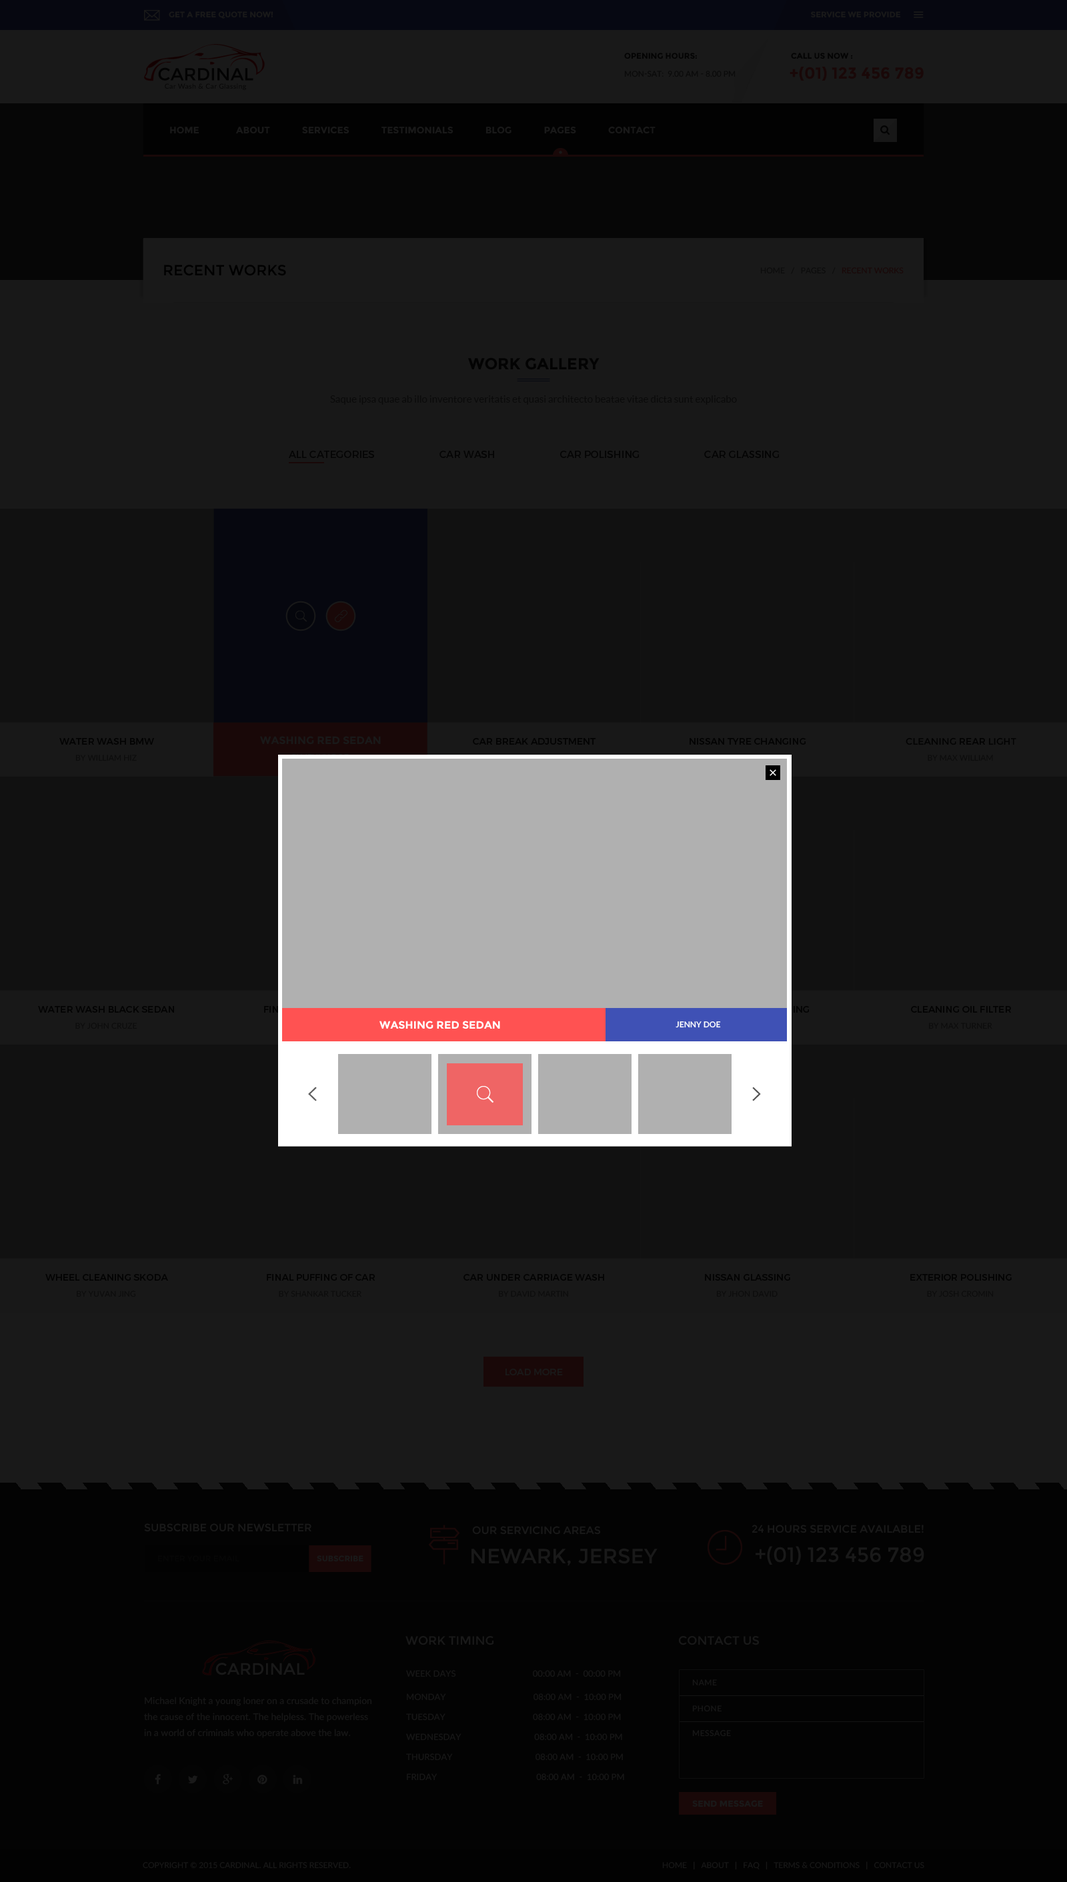
<style>
.page{position:relative;width:1067px;height:1882px;background:#111111}
.page>*{position:absolute;margin:0}
.t1{font:8px "Montserrat-Bold";color:#191919;text-transform:uppercase}
.t2{font:8px "Montserrat-Bold";color:#030303;text-transform:uppercase}
.t3{font:8px "Lato-Medium";color:#0a0a0a;text-transform:uppercase}
.t4{font:16px "Montserrat-Bold";color:#190808;text-transform:uppercase}
.t5{font:9.3px "Montserrat-Bold";color:#191919;text-transform:uppercase}
.t6{font:14.7px "Montserrat-Regular";color:#000000;text-transform:uppercase}
.t7{font:8px "Lato-Regular";color:#0c0c0c;text-transform:uppercase}
.t8{font:16px "Montserrat-Bold";color:#030303}
.t9{font:10px "Lato-Regular";color:#0a0a0a}
.t10{font:10px "Montserrat-Regular";color:#040404;text-transform:uppercase}
.t11{font:10.7px "Montserrat-Bold";color:#191919;text-transform:uppercase}
.t12{font:9.3px "Montserrat-Regular";color:#030303;text-transform:uppercase}
.t13{font:10.7px "Montserrat-Bold";color:#ffffff;text-transform:uppercase}
.t14{font:8px "Lato-Semibold";color:#ffffff;text-transform:uppercase}
.t15{font:9.3px "Montserrat-Regular";color:#191919;text-transform:uppercase}
.t16{font:10.7px "Montserrat-Regular";color:#191919;text-transform:uppercase}
.t17{font:20.7px "Montserrat-Regular";color:#191919;text-transform:uppercase}
.t18{font:12px "Montserrat-Regular";color:#191919;text-transform:uppercase}
.t19{font:8.7px "Lato-Medium";color:#171717;text-transform:uppercase}
.t20{font:8px "Lato-Medium";letter-spacing:0.04em;color:#171717;text-transform:uppercase}
.t21{font:9.3px/16px "Lato-Medium";color:#171717}
.t22{font:8.7px "Lato-Medium";color:#171717}
.t23{font:8.7px "Montserrat-Bold";color:#191919;text-transform:uppercase}
.t24{font:8px "Lato-Regular";color:#171717;text-transform:uppercase}
</style>
<div class="page">
<p class="t1" style="left:811px;top:11px;width:90px;height:7px">service we provide</p>
<p class="t2" style="left:624px;top:53px;width:73px;height:6px">OPENING HOURS:</p>
<p class="t2" style="left:791px;top:53px;width:62px;height:6px">Call us now :</p>
<p class="t3" style="left:624px;top:71px;width:111px;height:6px">MON-SAT:  9.00 AM - 8.00 Pm</p>
<p class="t4" style="left:789px;top:67px;width:134px;height:14px">+(01) 123 456 789</p>
<p class="t5" style="left:170px;top:126px;width:485px;height:8px">Home             About             Services             Testimonials             Blog             pAGES             Contact</p>
<p class="t6" style="left:164px;top:265px;width:122px;height:11px">Recent Works</p>
<p class="t7" style="left:760px;top:267px;width:143px;height:7px">Home   /   Pages   /   Recent Works</p>
<p class="t8" style="left:468px;top:357px;width:131px;height:13px">WORK GALLERY</p>
<p class="t9" style="left:330px;top:395px;width:407px;height:10px">Saque ipsa quae ab illo inventore veritatis et quasi architecto beatae vitae dicta sunt explicabo</p>
<p class="t10" style="left:289px;top:451px;width:490px;height:7px">All Categories                         Car Wash                         Car Polishing                         Car Glassing</p>
<p class="t11" style="left:260px;top:736px;width:121px;height:9px">Washing Red Sedan</p>
<p class="t12" style="left:905px;top:737px;width:111px;height:8px">cleaning Rear light</p>
<p class="t12" style="left:59px;top:738px;width:95px;height:7px">water wash bmw</p>
<p class="t12" style="left:473px;top:738px;width:123px;height:7px">car breaK adjustment</p>
<p class="t12" style="left:689px;top:738px;width:116px;height:7px">nissan tyre changing</p>
<p class="t7" style="left:75px;top:755px;width:62px;height:6px">By william Hiz</p>
<p class="t7" style="left:927px;top:755px;width:66px;height:6px">By max william</p>
<p class="t12" style="left:38px;top:1006px;width:136px;height:7px">water wash Black Sedan</p>
<p class="t12" style="left:911px;top:1006px;width:100px;height:7px">cleaning Oil Filter</p>
<p class="t7" style="left:75px;top:1023px;width:62px;height:6px">By John Cruze</p>
<p class="t13" style="left:379px;top:1021px;width:121px;height:8px">Washing Red Sedan</p>
<p class="t14" style="left:675px;top:1021px;width:46px;height:7px">Jenny Doe</p>
<p class="t7" style="left:929px;top:1023px;width:63px;height:6px">By max Turner</p>
<p class="t12" style="left:45px;top:1274px;width:123px;height:7px">Wheel Cleaning Skoda</p>
<p class="t12" style="left:267px;top:1274px;width:108px;height:7px">final Puffing of car</p>
<p class="t12" style="left:463px;top:1274px;width:141px;height:7px">car Under Carriage Wash</p>
<p class="t12" style="left:705px;top:1274px;width:85px;height:7px">nissan Glassing</p>
<p class="t12" style="left:910px;top:1274px;width:101px;height:7px">Exterior Polishing</p>
<p class="t7" style="left:77px;top:1291px;width:59px;height:6px">By Yuvan jing</p>
<p class="t7" style="left:279px;top:1291px;width:82px;height:6px">By Shankar Tucker</p>
<p class="t7" style="left:499px;top:1291px;width:69px;height:6px">By david martin</p>
<p class="t7" style="left:716px;top:1291px;width:61px;height:6px">By jhon David</p>
<p class="t7" style="left:927px;top:1291px;width:66px;height:6px">By Josh Cromin</p>
<p class="t15" style="left:505px;top:1369px;width:58px;height:6px">Load More</p>
<p class="t16" style="left:144px;top:1523px;width:167px;height:9px">subscribe our newsletter</p>
<p class="t16" style="left:472px;top:1526px;width:129px;height:9px">OUR SERVICING AREAS</p>
<p class="t16" style="left:751px;top:1525px;width:172px;height:8px">24 HOURS SERVICE AVAILABLE!</p>
<p class="t17" style="left:471px;top:1548px;width:186px;height:18px">Newark, Jersey</p>
<p class="t17" style="left:755px;top:1546px;width:169px;height:19px">+(01) 123 456 789</p>
<p class="t1" style="left:317px;top:1555px;width:46px;height:7px">Subscribe</p>
<p class="t18" style="left:405px;top:1635px;width:89px;height:10px">Work Timing</p>
<p class="t18" style="left:678px;top:1635px;width:81px;height:10px">contact us</p>
<p class="t19" style="left:406px;top:1670px;width:215px;height:7px">Week Days                                   00:00 am  -  00:00 pm</p>
<p class="t20" style="left:692px;top:1679px;width:25px;height:7px">Name</p>
<p class="t21" style="left:144px;top:1697px;width:228px;height:41px">Michael Knight a young loner on a crusade to champion the cause of the innocent. The helpless. The powerless in a world of criminals who operate above the law.</p>
<p class="t19" style="left:407px;top:1693px;width:214px;height:8px"><span class="t22">MONDAY                                     </span>08:00 am  -  10:00 pm</p>
<p class="t20" style="left:692px;top:1705px;width:29px;height:7px">Phone</p>
<p class="t19" style="left:406px;top:1713px;width:215px;height:8px"><span class="t22">TUESDAY                                     </span>08:00 am  -  10:00 pm</p>
<p class="t19" style="left:406px;top:1733px;width:216px;height:8px"><span class="t22">WEDNESDAY                               </span>08:00 am  -  10:00 pm</p>
<p class="t20" style="left:692px;top:1730px;width:39px;height:7px">Message</p>
<p class="t19" style="left:406px;top:1753px;width:217px;height:8px"><span class="t22">THURSDAY                                   </span>08:00 am  -  10:00 pm</p>
<p class="t19" style="left:407px;top:1773px;width:217px;height:8px"><span class="t22">FRIDAY                                          </span>08:00 am  -  10:00 pm</p>
<p class="t23" style="left:692px;top:1800px;width:71px;height:7px">Send message</p>
<p class="t24" style="left:143px;top:1862px;width:208px;height:7px">Copyright © 2015 CARDINAL. All Rights Reserved.</p>
<p class="t24" style="left:662px;top:1861px;width:262px;height:9px">Home   |   About   |   FAQ   |   Terms &amp; Conditions   |   Contact Us</p>
</div>
